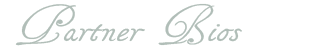
<style>
.page{position:relative;width:325px;height:50px;background:#ffffff}
.page>*{position:absolute;margin:0}
.t1{font:28.8px "Tagettes";letter-spacing:0.02em;color:#b1beb8;scale:1.2 1}
</style>
<div class="page">
<p class="t1" style="left:15px;top:3px;width:227px;height:43px">Partner Bios</p>
</div>
